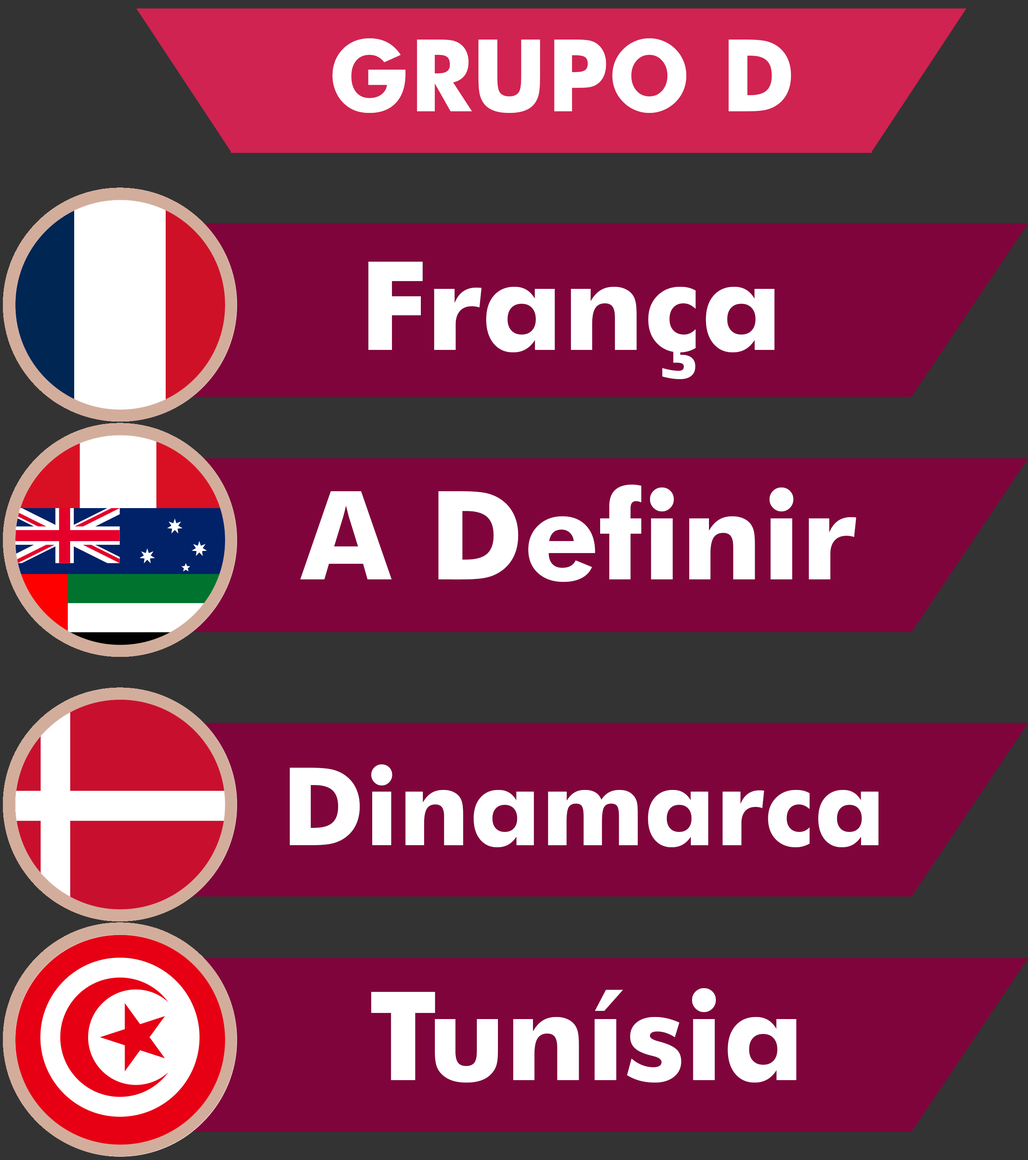
<style>
.page{position:relative;width:1028px;height:1160px;background:#7f043b}
.page>*{position:absolute;margin:0}
.t1{font:100.5px "FuturaBT-Bold";color:#ffffff;scale:0.96 1}
.t2{font:123.6px "FuturaBT-Bold";color:#ffffff}
.t3{font:108.5px "FuturaBT-Bold";color:#ffffff}
</style>
<div class="page">
<p class="t1" style="left:332px;top:38px;width:459px;height:75px">GRUPO D</p>
<p class="t2" style="left:368px;top:262px;width:406px;height:117px">França</p>
<p class="t2" style="left:300px;top:485px;width:556px;height:97px">A Definir</p>
<p class="t3" style="left:290px;top:764px;width:589px;height:83px">Dinamarca</p>
<p class="t2" style="left:371px;top:988px;width:425px;height:95px">Tunísia</p>
</div>
